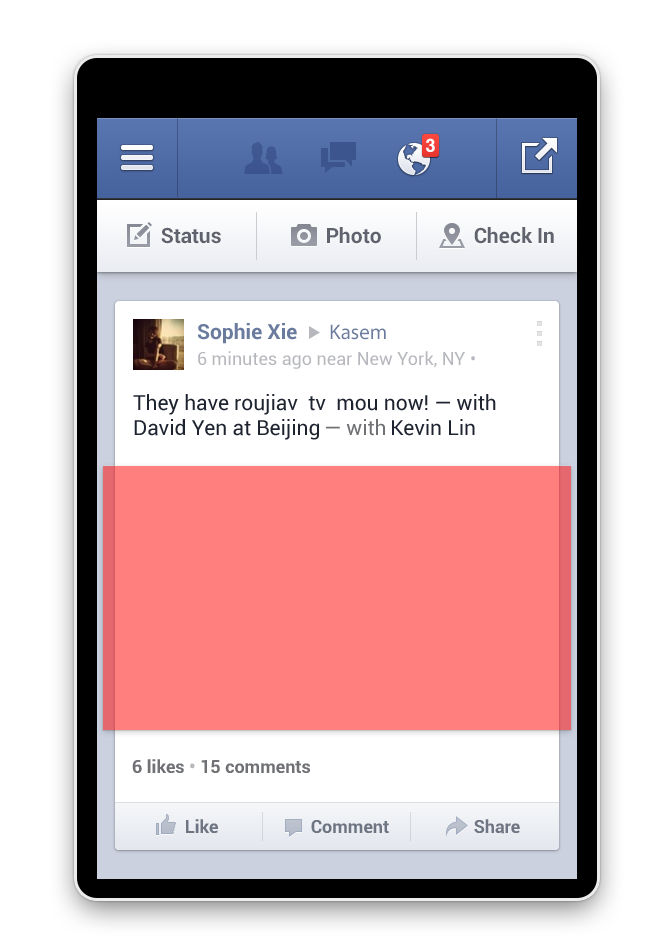
<style>
.page{position:relative;width:665px;height:936px;background:#ffffff}
.page>*{position:absolute;margin:0}
.t1{font:21px "Roboto-Bold";color:#6a7b9e}
.t2{font:21px "MyriadPro-Regular";color:#6a7b9e}
.t3{font:18px "Roboto-Regular";color:#b6b8bd}
.t4{font:21px "Roboto-Regular";color:#1e2330}
.t5{font:21px "Roboto-Regular";color:#6f7175}
.t6{font:18px "Roboto-Bold";color:#6f7175}
.t7{font:18px "Roboto-Bold";color:#b6b8bd}
.t8{font:18px "Roboto-Bold";color:#6d7482}
</style>
<div class="page">
<p class="t1" style="left:198px;top:323px;width:99px;height:21px">Sophie Xie</p>
<p class="t2" style="left:330px;top:324px;width:56px;height:16px">Kasem</p>
<p class="t3" style="left:198px;top:351px;width:277px;height:18px">6 minutes ago near New York, NY •</p>
<p class="t4" style="left:133px;top:394px;width:363px;height:46px">They have roujiav  tv  mou now! — with David Yen at Beijing    Kevin Lin</p>
<p class="t5" style="left:326px;top:419px;width:59px;height:17px">— with</p>
<p class="t6" style="left:132px;top:759px;width:178px;height:14px">6 likes <span class="t7">•</span> 15 comments</p>
<p class="t8" style="left:186px;top:819px;width:32px;height:14px">Like</p>
<p class="t8" style="left:311px;top:820px;width:78px;height:13px">Comment</p>
<p class="t8" style="left:474px;top:819px;width:46px;height:15px">Share</p>
</div>
